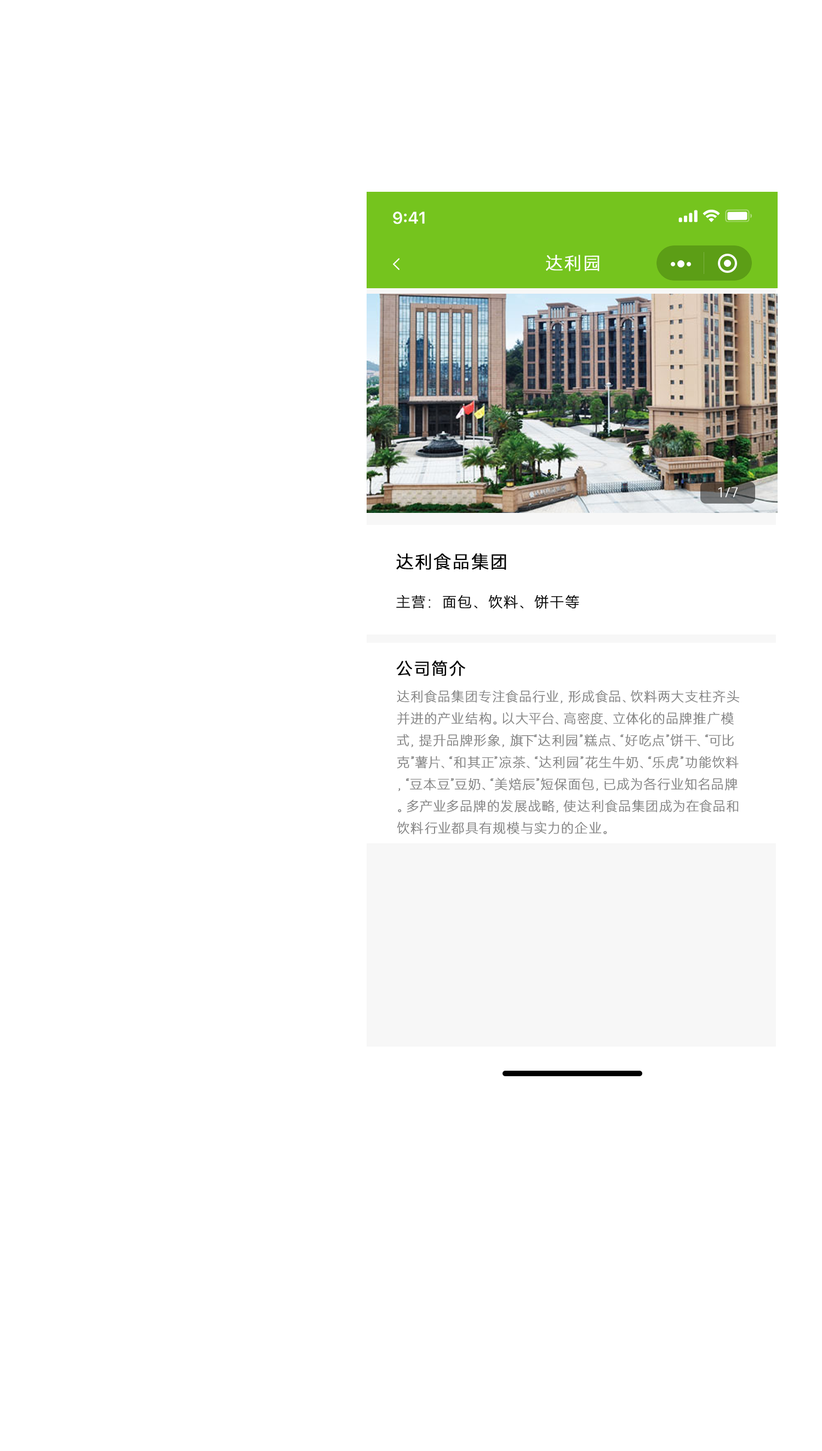
<style>
.page{position:relative;width:822px;height:1451px;background:#ffffff}
.page>*{position:absolute;margin:0}
.t1{font:17.5px "HarmonyOS_Sans_SC_Light";letter-spacing:0.04em;color:#ffffff;text-transform:uppercase;font-weight:bold}
.t2{font:13.1px "HarmonyOS_Sans_SC_Thin";letter-spacing:0.04em;color:#ffffff;text-transform:uppercase;font-weight:bold}
.t3{font:17.5px "HarmonyOS_Sans_SC_Light";letter-spacing:0.04em;color:#000000;text-transform:uppercase;font-weight:bold}
.t4{font:14.2px "HarmonyOS_Sans_SC_Thin";letter-spacing:0.04em;color:#000000;text-transform:uppercase;font-weight:bold}
.t5{font:16.4px "HarmonyOS_Sans_SC_Light";letter-spacing:0.04em;color:#000000;text-transform:uppercase;font-weight:bold}
.t6{font:13.1px/21.9px "HarmonyOS_Sans_SC_Thin";letter-spacing:0.04em;color:#7f7f7f;text-transform:uppercase;font-weight:bold}
</style>
<div class="page">
<p class="t1" style="left:546px;top:255px;width:53px;height:16px">达利园</p>
<p class="t2" style="left:718px;top:487px;width:20px;height:11px">1/7</p>
<p class="t3" style="left:396px;top:553px;width:110px;height:17px">达利食品集团</p>
<p class="t4" style="left:396px;top:594px;width:183px;height:15px">主营：面包、饮料、饼干等</p>
<p class="t5" style="left:396px;top:660px;width:69px;height:16px">公司简介</p>
<p class="t6" style="left:397px;top:690px;width:342px;height:144px">达利食品集团专注食品行业，形成食品、饮料两大支柱齐头并进的产业结构。以大平台、高密度、立体化的品牌推广模式，提升品牌形象，旗下“达利园”糕点、“好吃点”饼干、“可比克”薯片、“和其正”凉茶、“达利园”花生牛奶、“乐虎”功能饮料，“豆本豆”豆奶、“美焙辰”短保面包，已成为各行业知名品牌。多产业多品牌的发展战略，使达利食品集团成为在食品和饮料行业都具有规模与实力的企业。</p>
</div>
